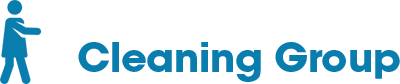
<style>
.page{position:relative;width:400px;height:84px;background:#ffffff}
.page>*{position:absolute;margin:0}
.t1{font:40px/39px "ITCAvantGardeStd-Bold";letter-spacing:-0.01em;color:#097dae}
.t2{font:40px/39px "ITCAvantGardeStd-Bold";letter-spacing:-0.01em;color:#ffffff}
</style>
<div class="page">
<p class="t1" style="left:78px;top:3px;width:322px;height:79px"><span class="t2">NSW </span><br>Cleaning Group</p>
</div>
